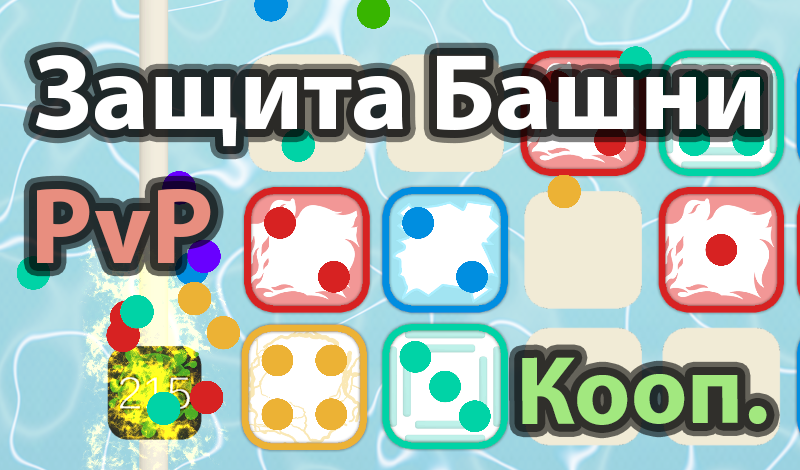
<style>
.page{position:relative;width:800px;height:470px}
.page>*{position:absolute;margin:0}
.t1{font:108px "MyriadPro-Bold";color:#ffffff}
.t2{font:108px "MyriadPro-Bold";color:#e88e7f}
.t3{font:98px "MyriadPro-Bold";color:#a2e87f}
</style>
<div class="page">
<p class="t1" style="left:36px;top:55px;width:724px;height:92px">Защита Башни</p>
<p class="t2" style="left:37px;top:188px;width:174px;height:75px">PvP</p>
<p class="t3" style="left:522px;top:357px;width:245px;height:68px">Кооп.</p>
</div>
